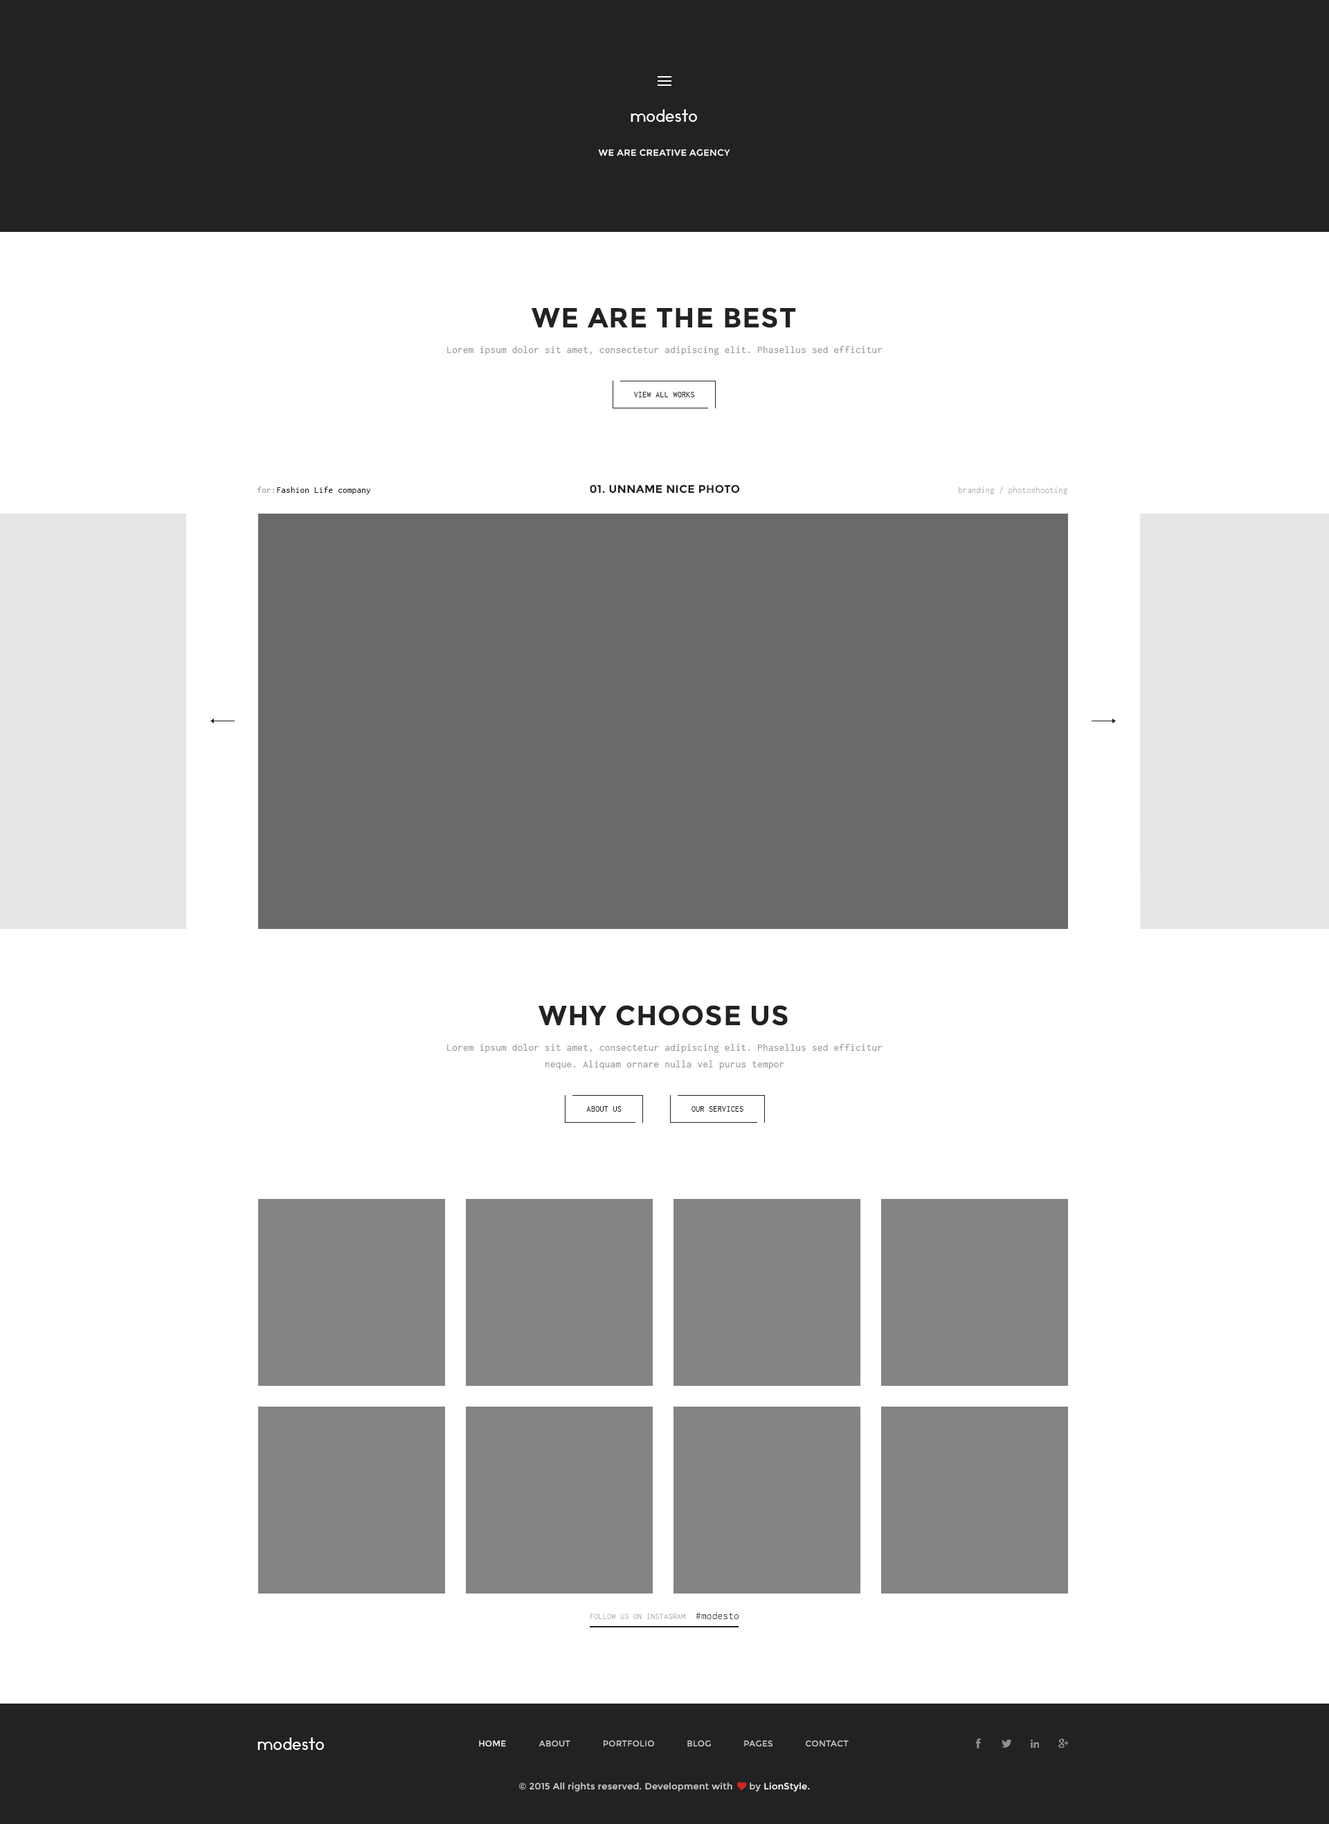
<style>
.page{position:relative;width:1329px;height:1824px;background:#ffffff}
.page>*{position:absolute;margin:0}
.t1{font:16.6px "Ikaros";letter-spacing:0.025em;color:#fefefe}
.t2{font:9px "Montserrat-Regular";letter-spacing:0.025em;color:#fefefe;text-transform:uppercase}
.t3{font:27.7px "Montserrat-Bold";letter-spacing:0.025em;color:#222222;text-transform:uppercase}
.t4{font:10.4px "Inconsolata";letter-spacing:0.025em;color:#989898}
.t5{font:8.3px "Inconsolata";letter-spacing:0.025em;color:#222222;text-transform:uppercase}
.t6{font:11.1px "Montserrat-Bold";letter-spacing:0.025em;color:#222222;text-transform:uppercase}
.t7{font:9px "Inconsolata";letter-spacing:0.025em;color:#989898}
.t8{font:9px "Inconsolata";letter-spacing:0.025em;color:#222222}
.t9{font:9px "Inconsolata";letter-spacing:0.025em;color:#989898;scale:0.97 1}
.t10{font:10.4px/16.6px "Inconsolata";letter-spacing:0.025em;color:#989898}
.t11{font:8.3px "Inconsolata";letter-spacing:0.025em;color:#989898;text-transform:uppercase}
.t12{font:10.4px "Inconsolata";letter-spacing:0.025em;color:#222222}
.t13{font:16.6px "Ikaros";letter-spacing:0.025em;color:#ffffff}
.t14{font:8.3px "Montserrat-Regular";letter-spacing:0.025em;color:#ffffff;text-transform:uppercase}
.t15{font:8.3px "Montserrat-Regular";letter-spacing:0.025em;color:#cecece;text-transform:uppercase}
.t16{font:9px "Montserrat-Regular";letter-spacing:0.025em;color:#cecece}
.t17{font:9px "FontAwesome";letter-spacing:0.025em;color:#cecece}
.t18{font:9px "Montserrat-Regular";letter-spacing:0.025em;color:#ffffff}
.t19{font:9px "Montserrat-Regular";letter-spacing:0.025em;color:#000000}
</style>
<div class="page">
<p class="t1" style="left:631px;top:109px;width:66px;height:13px">modesto</p>
<p class="t2" style="left:598px;top:149px;width:132px;height:7px">we are creative agency</p>
<p class="t3" style="left:532px;top:307px;width:264px;height:21px">we are the best</p>
<p class="t4" style="left:447px;top:346px;width:436px;height:9px">Lorem ipsum dolor sit amet, consectetur adipiscing elit. Phasellus sed efficitur</p>
<p class="t5" style="left:633px;top:392px;width:62px;height:5px">view all works</p>
<p class="t6" style="left:590px;top:485px;width:150px;height:9px">01. unname nice photo</p>
<p class="t7" style="left:258px;top:487px;width:16px;height:6px">for:</p>
<p class="t8" style="left:277px;top:487px;width:94px;height:7px">Fashion Life company</p>
<p class="t9" style="left:959px;top:487px;width:109px;height:8px">branding / photoshooting</p>
<p class="t3" style="left:539px;top:1005px;width:249px;height:21px">why choose us</p>
<p class="t10" style="left:447px;top:1044px;width:436px;height:26px;text-align:center">Lorem ipsum dolor sit amet, consectetur adipiscing elit. Phasellus sed efficitur neque. Aliquam ornare nulla vel purus tempor</p>
<p class="t5" style="left:586px;top:1106px;width:36px;height:6px">about us</p>
<p class="t5" style="left:692px;top:1106px;width:52px;height:6px">our services</p>
<p class="t11" style="left:591px;top:1614px;width:94px;height:5px">follow us on instagram</p>
<p class="t12" style="left:696px;top:1612px;width:43px;height:8px">#modesto</p>
<p class="t13" style="left:258px;top:1738px;width:66px;height:12px">modesto</p>
<p class="t14" style="left:479px;top:1740px;width:27px;height:7px">home</p>
<p class="t15" style="left:539px;top:1740px;width:310px;height:7px">about             portfolio             Blog             pages             contact</p>
<p class="t16" style="left:519px;top:1782px;width:242px;height:10px">© 2015 All rights reserved. Development with <span class="t17">♥ </span>by</p>
<p class="t18" style="left:764px;top:1783px;width:46px;height:9px"><span class="t19"> </span>LionStyle.</p>
</div>
